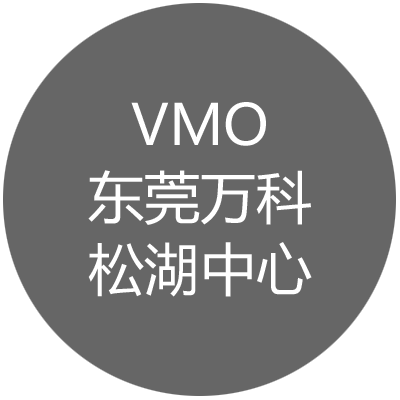
<style>
.page{position:relative;width:400px;height:400px;background:#666666}
.page>*{position:absolute;margin:0}
.t1{font:56px/72px "MicrosoftYaHeiUI";color:#ffffff}
</style>
<div class="page">
<p class="t1" style="left:88px;top:102px;width:224px;height:195px;text-align:center">VMO<br>东莞万科<br>松湖中心</p>
</div>
